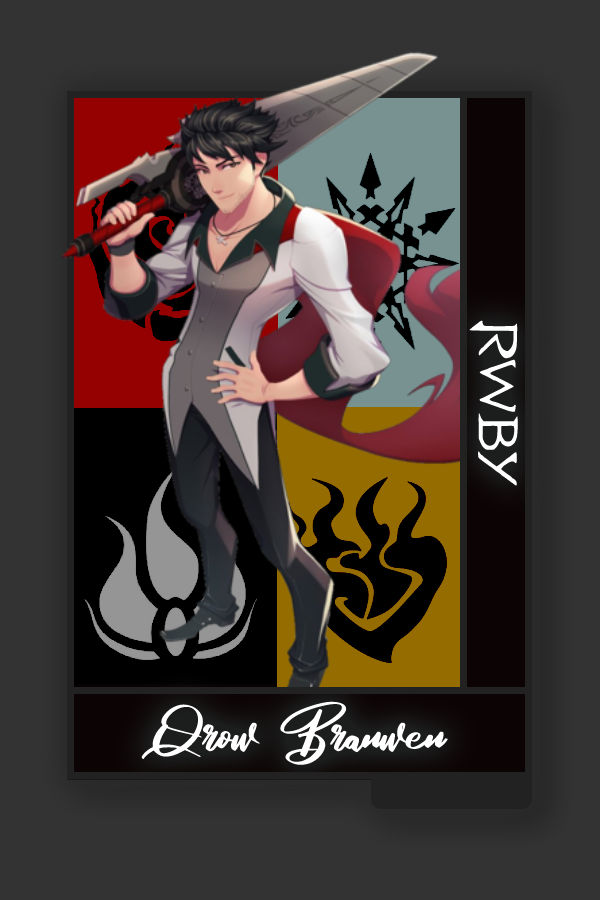
<style>
.page{position:relative;width:600px;height:900px;background:#333333}
.page>*{position:absolute;margin:0}
.t1{font:61.3px "RWBY_Style";color:#ffffff;scale:1.25 1}
.t2{font:76.6px "RosegaFREE";color:#ffffff;scale:0.91 1}
</style>
<div class="page">
<p class="t1" style="left:469px;top:320px;width:49px;height:166px;rotate:90deg">RWBY</p>
<p class="t2" style="left:141px;top:701px;width:307px;height:65px">Qrow Branwen</p>
</div>
